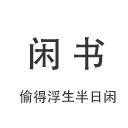
<style>
.page{position:relative;width:128px;height:128px;background:#ffffff}
.page>*{position:absolute;margin:0}
.t1{font:36px "STHeitiSC-Medium";color:#333333;text-transform:uppercase}
.t2{font:14px "STHeitiSC-Medium";color:#333333;text-transform:uppercase}
</style>
<div class="page">
<p class="t1" style="left:29px;top:37px;width:76px;height:33px">闲 书</p>
<p class="t2" style="left:19px;top:90px;width:97px;height:14px">偷得浮生半日闲</p>
</div>
